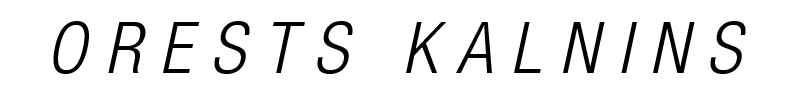
<style>
.page{position:relative;width:800px;height:94px;background:#ffffff}
.page>*{position:absolute;margin:0}
.t1{font:71.9px "HelveticaNeueLTStd-LtCnO";letter-spacing:0.26em;color:#010101}
</style>
<div class="page">
<p class="t1" style="left:53px;top:21px;width:693px;height:53px">ORESTS KALNINS</p>
</div>
